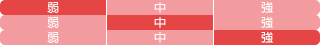
<style>
.page{position:relative;width:320px;height:45px;background:#f29c9f}
.page>*{position:absolute;margin:0}
.t1{font:12px "AdobeFanHeitiStd-Bold";letter-spacing:0.06em;color:#ffffff}
</style>
<div class="page">
<p class="t1" style="left:47px;top:2px;width:12px;height:11px">弱</p>
<p class="t1" style="left:154px;top:2px;width:12px;height:11px">中</p>
<p class="t1" style="left:261px;top:1px;width:12px;height:12px">強</p>
<p class="t1" style="left:47px;top:17px;width:12px;height:11px">弱</p>
<p class="t1" style="left:154px;top:17px;width:12px;height:11px">中</p>
<p class="t1" style="left:261px;top:16px;width:12px;height:12px">強</p>
<p class="t1" style="left:47px;top:32px;width:12px;height:11px">弱</p>
<p class="t1" style="left:154px;top:32px;width:12px;height:11px">中</p>
<p class="t1" style="left:261px;top:31px;width:12px;height:12px">強</p>
</div>
